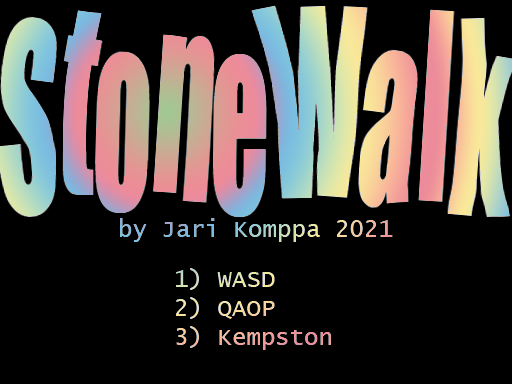
<style>
.page{position:relative;width:512px;height:384px;background:#000000}
.page>*{position:absolute;margin:0}
.t1{font:24px "LucidaConsole"}
</style>
<div class="page">
<p class="t1" style="left:120px;top:218px;width:273px;height:24px">by Jari Komppa 2021</p>
<p class="t1" style="left:176px;top:268px;width:155px;height:82px">1) WASD<br>2) QAOP<br>3) Kempston</p>
</div>
